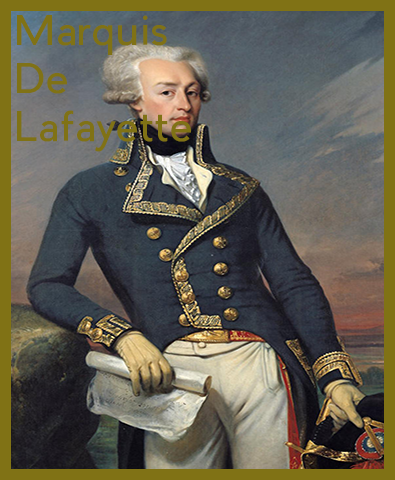
<style>
.page{position:relative;width:395px;height:480px}
.page>*{position:absolute;margin:0}
.t1{font:40px "PierSans";color:#807215}
</style>
<div class="page">
<p class="t1" style="left:17px;top:15px;width:174px;height:137px">Marquis<br>De<br>Lafayette</p>
</div>
